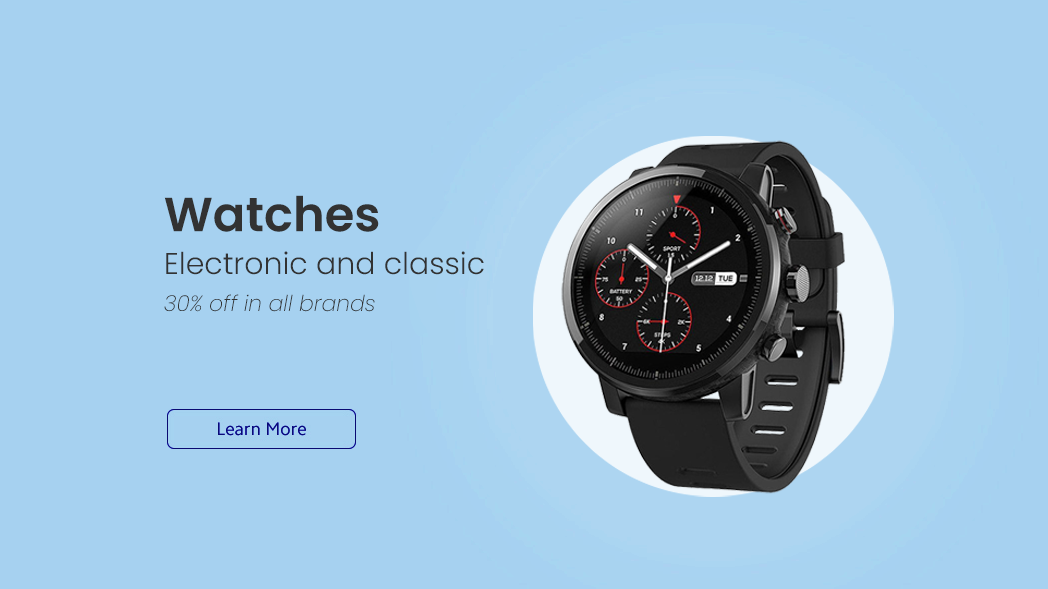
<style>
.page{position:relative;width:1048px;height:589px;background:#a6d1f0}
.page>*{position:absolute;margin:0}
.t1{font:48px "Poppins-SemiBold";color:#323232}
.t2{font:30px "Poppins-Light";color:#323232}
.t3{font:22px "Poppins-ExtraLightItalic";color:#323232}
</style>
<div class="page">
<p class="t1" style="left:164px;top:195px;width:215px;height:37px">Watches</p>
<p class="t2" style="left:166px;top:251px;width:318px;height:24px">Electronic and classic</p>
<p class="t3" style="left:164px;top:294px;width:211px;height:18px">30% off in all brands</p>
</div>
